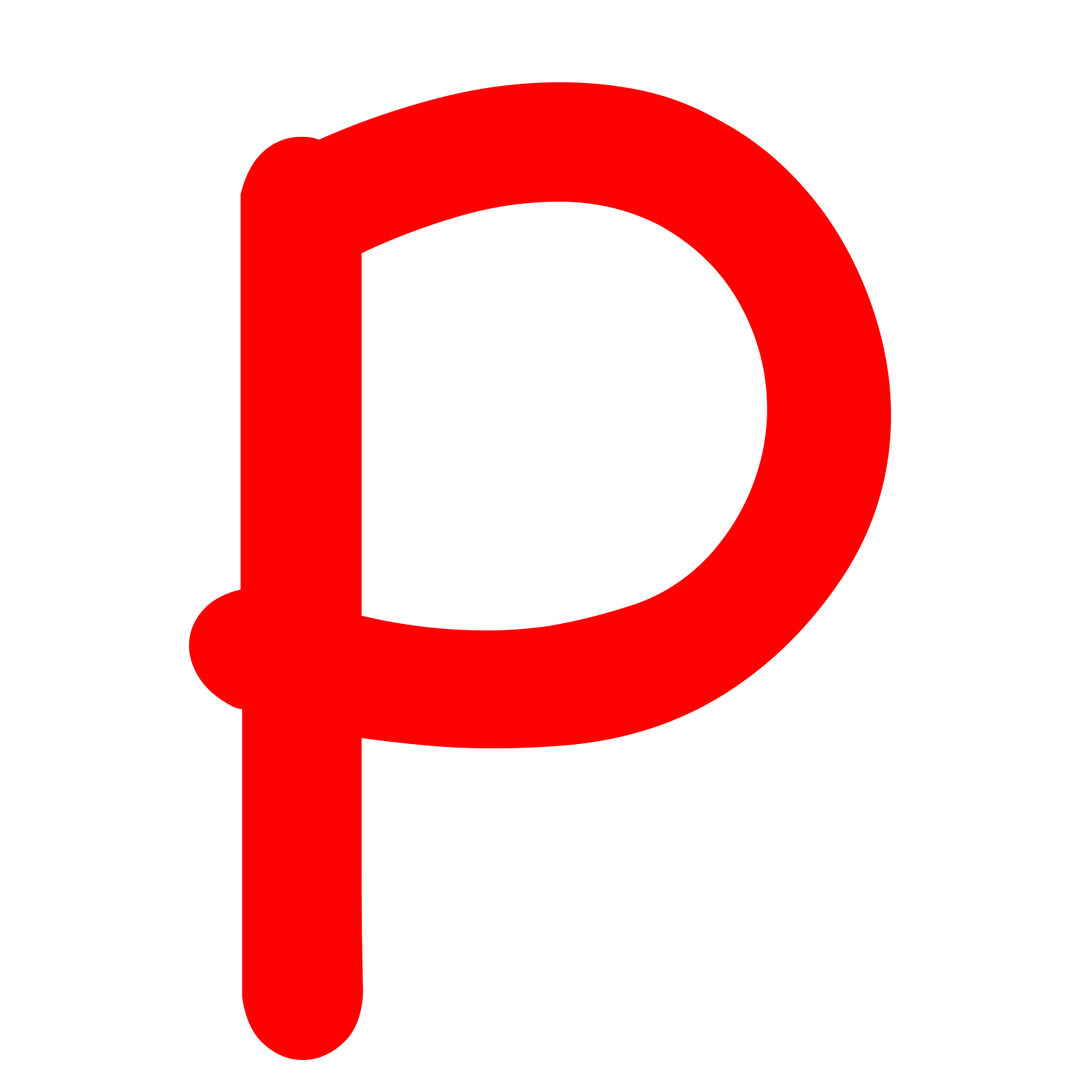
<style>
.page{position:relative;width:1092px;height:1092px;background:#ffffff}
.page>*{position:absolute;margin:0}
.t1{font:1334.6px "Chalkboard";color:#ff0000}
</style>
<div class="page">
<p class="t1" style="left:189px;top:82px;width:702px;height:978px">P</p>
</div>
